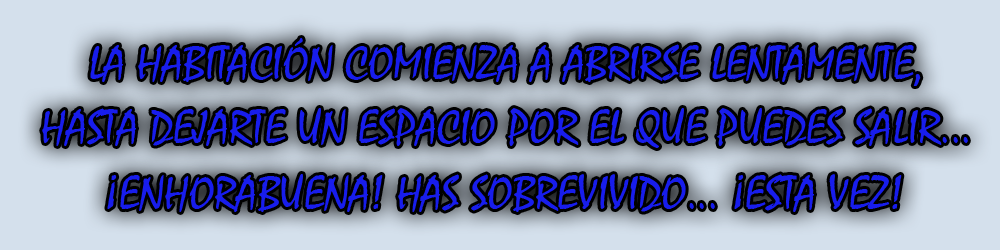
<style>
.page{position:relative;width:1000px;height:250px;background:#d4e0ec}
.page>*{position:absolute;margin:0}
.t1{font:48px "Mistral";color:#181dec}
</style>
<div class="page">
<p class="t1" style="left:90px;top:38px;width:831px;height:48px">LA HABITACIÓN COMIENZA A ABRIRSE LENTAMENTE,</p>
<p class="t1" style="left:42px;top:108px;width:926px;height:40px">HASTA DEJARTE UN ESPACIO POR EL QUE PUEDES SALIR...</p>
<p class="t1" style="left:107px;top:174px;width:795px;height:38px">¡ENHORABUENA! HAS SOBREVIVIDO... ¡ESTA VEZ!</p>
</div>
